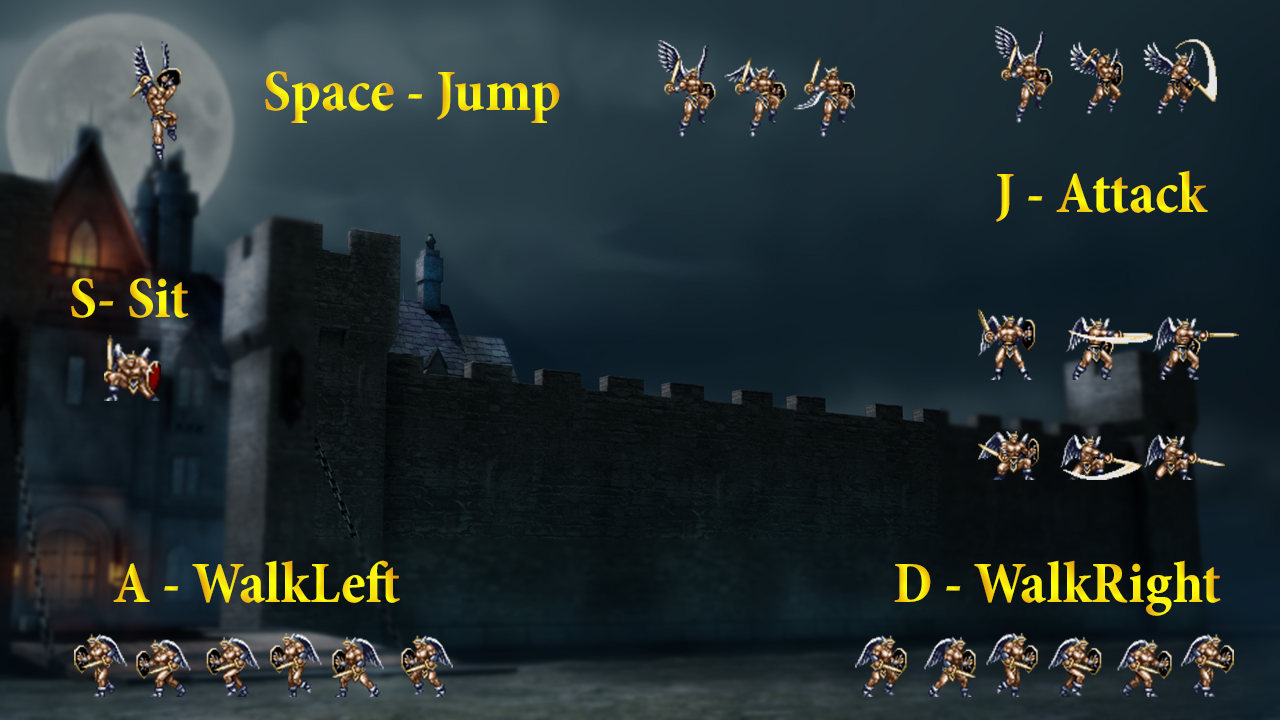
<style>
.page{position:relative;width:1280px;height:720px}
.page>*{position:absolute;margin:0}
.t1{font:59.3px "MinionPro-BoldCn"}
</style>
<div class="page">
<p class="t1" style="left:265px;top:71px;width:295px;height:52px">Space - Jump</p>
<p class="t1" style="left:996px;top:170px;width:212px;height:52px">J - Attack</p>
<p class="t1" style="left:71px;top:278px;width:118px;height:40px">S- Sit</p>
<p class="t1" style="left:113px;top:560px;width:287px;height:43px">A - WalkLeft</p>
<p class="t1" style="left:894px;top:560px;width:327px;height:56px">D - WalkRight</p>
</div>
